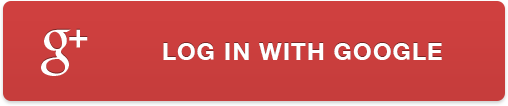
<style>
.page{position:relative;width:508px;height:106px}
.page>*{position:absolute;margin:0}
.t1{font:24px "HelveticaNeue-Bold";letter-spacing:0.05em;color:#ffffff;text-transform:uppercase}
</style>
<div class="page">
<p class="t1" style="left:163px;top:43px;width:279px;height:17px">Log in with GOOGLE</p>
</div>
